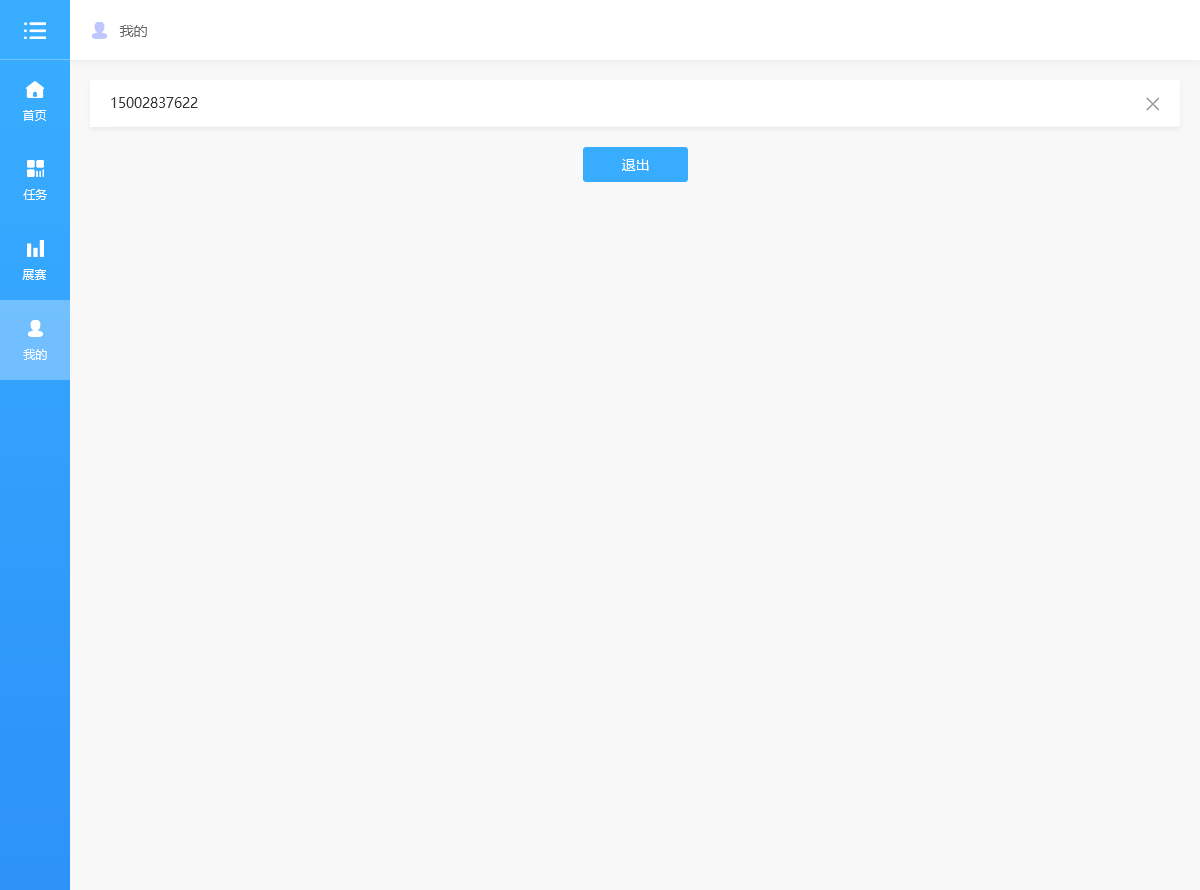
<style>
.page{position:relative;width:1200px;height:890px;background:#f8f8f8}
.page>*{position:absolute;margin:0}
.t1{font:14px "MicrosoftYaHei";color:#666666}
.t2{font:14px "MicrosoftYaHei";color:#333333}
.t3{font:12px "MicrosoftYaHei";color:#ffffff}
.t4{font:14px "MicrosoftYaHei";color:#ffffff}
</style>
<div class="page">
<p class="t1" style="left:119px;top:25px;width:28px;height:12px">我的</p>
<p class="t2" style="left:111px;top:97px;width:87px;height:11px">15002837622</p>
<p class="t3" style="left:23px;top:110px;width:24px;height:11px">首页</p>
<p class="t4" style="left:622px;top:159px;width:27px;height:12px">退出</p>
<p class="t3" style="left:23px;top:189px;width:24px;height:11px">任务</p>
<p class="t3" style="left:22px;top:269px;width:24px;height:11px">展赛</p>
<p class="t3" style="left:23px;top:349px;width:24px;height:11px">我的</p>
</div>
